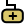
<style>
.page{position:relative;width:25px;height:25px;background:#ffffff}
.page>*{position:absolute;margin:0}
.t1{font:19.8px "OCRAExtended";color:#000000}
</style>
<div class="page">
<p class="t1" style="left:8px;top:12px;width:10px;height:8px">+</p>
</div>
